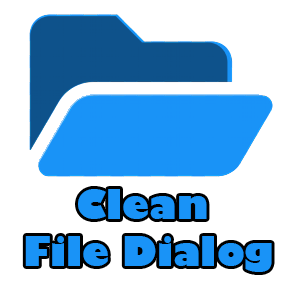
<style>
.page{position:relative;width:284px;height:284px;background:#ffffff}
.page>*{position:absolute;margin:0}
.t1{font:39.1px "GillSans-UltraBold";letter-spacing:-0.004em;color:#1993f8}
</style>
<div class="page">
<p class="t1" style="left:25px;top:189px;width:247px;height:83px;text-align:center">Clean <br>File Dialog</p>
</div>
